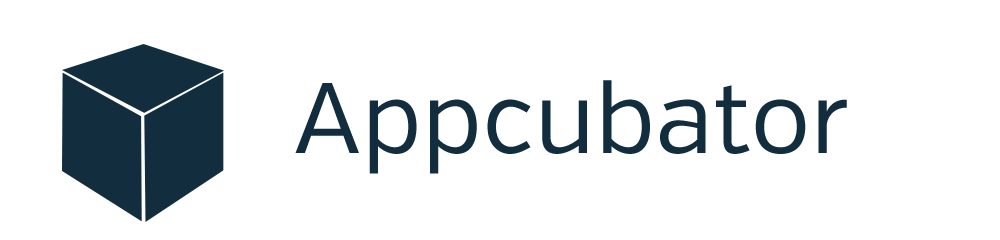
<style>
.page{position:relative;width:1000px;height:240px;background:#ffffff}
.page>*{position:absolute;margin:0}
.t1{font:100px "VerbRegular";color:#122d3e}
</style>
<div class="page">
<p class="t1" style="left:295px;top:80px;width:552px;height:94px">Appcubator</p>
</div>
